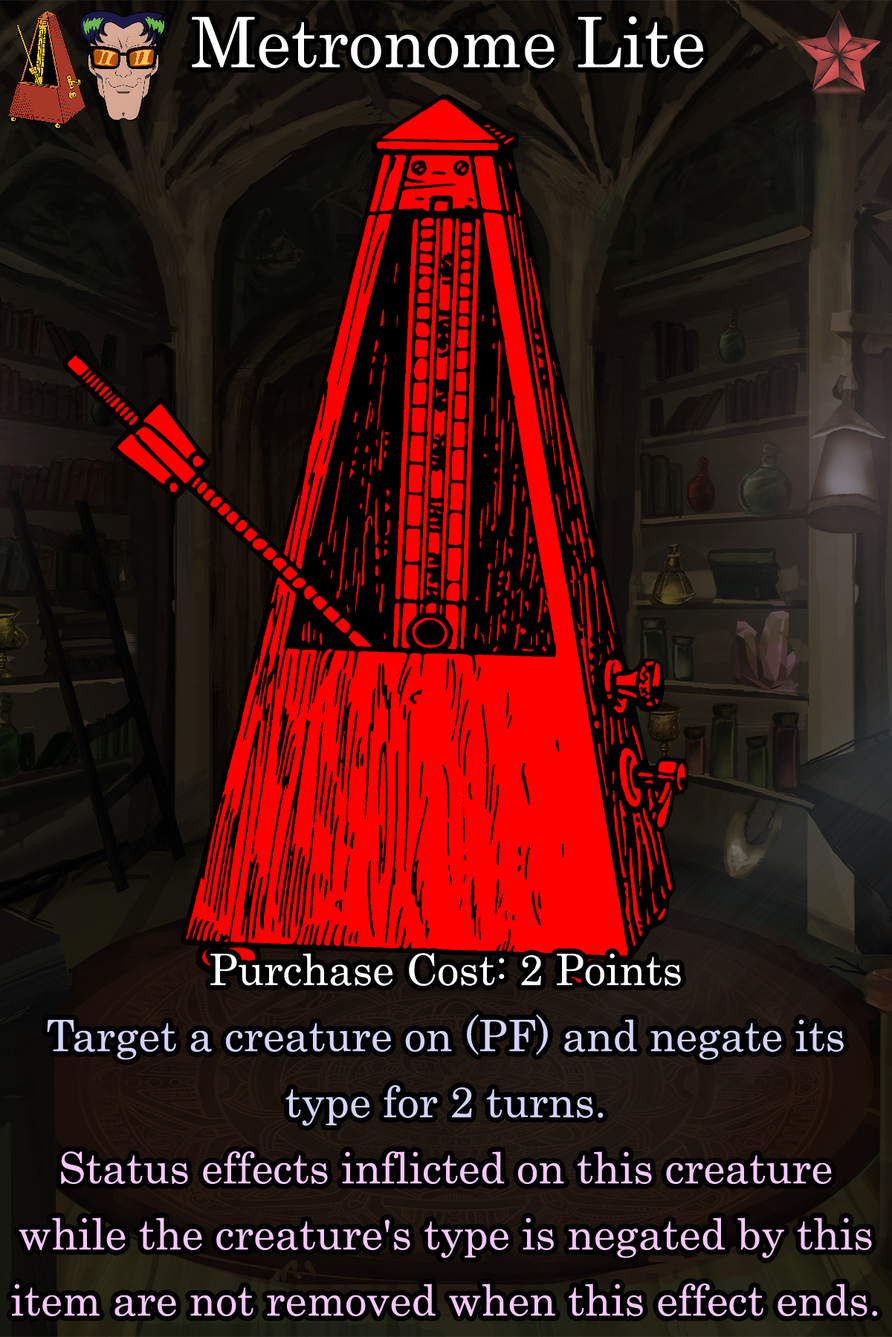
<style>
.page{position:relative;width:892px;height:1337px}
.page>*{position:absolute;margin:0}
.t1{font:118.9px "Century";color:#ffffff}
.t2{font:43.1px/66.1px "Century";color:#f9c6ff}
.t3{font:43.1px/66.1px "Century";color:#ffffff}
.t4{font:43.1px/66.1px "Century";color:#d4d3ff}
</style>
<div class="page">
<p class="t1" style="left:192px;top:16px;width:512px;height:52px">Metronome Lite</p>
<p class="t2" style="left:11px;top:953px;width:866px;height:364px;text-align:center"><span class="t3">Purchase Cost: 2 Points<br></span><span class="t4">Target a creature on (PF) and negate its type for 2 turns.<br></span>Status effects inflicted on this creature while the creature's type is negated by this item are not removed when this effect ends.</p>
</div>
